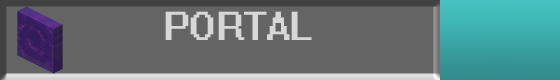
<style>
.page{position:relative;width:560px;height:80px;background:#646464}
.page>*{position:absolute;margin:0}
.t1{font:36px "System";color:#d7d7d7}
</style>
<div class="page">
<p class="t1" style="left:165px;top:11px;width:147px;height:29px">PORTAL</p>
</div>
